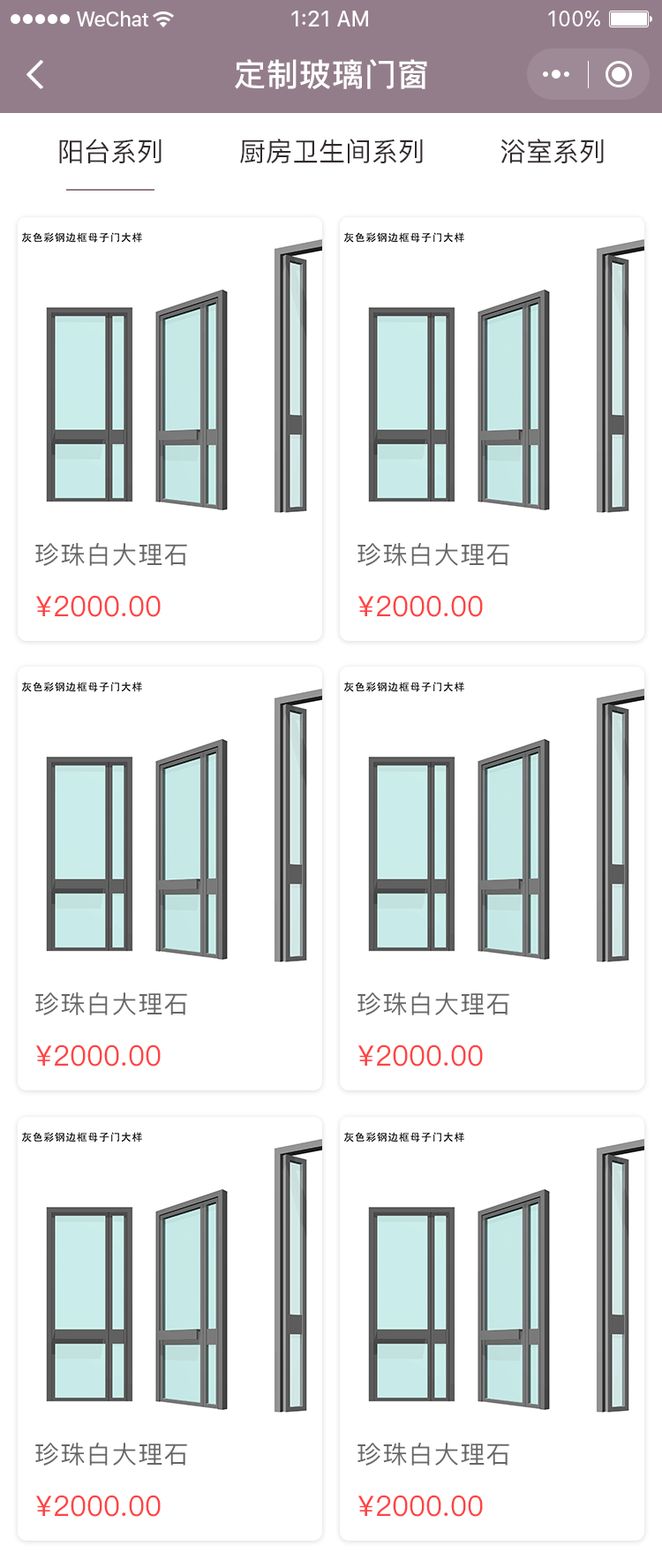
<style>
.page{position:relative;width:662px;height:1568px;background:#ffffff}
.page>*{position:absolute;margin:0}
.t1{font:31.8px "PingFang-SC-Bold";letter-spacing:0.028em;color:#ffffff}
.t2{font:26.5px "PingFang-SC-Medium";color:#322a2b}
.t3{font:24.7px "PingFang-SC-Medium";letter-spacing:0.048em;color:#666666}
.t4{font:28.3px "PingFang-SC-Medium";color:#ff4444}
</style>
<div class="page">
<p class="t1" style="left:235px;top:59px;width:192px;height:30px">定制玻璃门窗</p>
<p class="t2" style="left:59px;top:139px;width:103px;height:24px">阳台系列</p>
<p class="t2" style="left:240px;top:139px;width:183px;height:24px">厨房卫生间系列</p>
<p class="t2" style="left:501px;top:139px;width:103px;height:24px">浴室系列</p>
<p class="t3" style="left:35px;top:543px;width:152px;height:23px">珍珠白大理石</p>
<p class="t3" style="left:358px;top:543px;width:151px;height:23px">珍珠白大理石</p>
<p class="t4" style="left:36px;top:595px;width:125px;height:22px">¥2000.00</p>
<p class="t4" style="left:358px;top:595px;width:125px;height:22px">¥2000.00</p>
<p class="t3" style="left:35px;top:992px;width:152px;height:23px">珍珠白大理石</p>
<p class="t3" style="left:358px;top:992px;width:151px;height:23px">珍珠白大理石</p>
<p class="t4" style="left:36px;top:1044px;width:125px;height:23px">¥2000.00</p>
<p class="t4" style="left:358px;top:1044px;width:125px;height:23px">¥2000.00</p>
<p class="t3" style="left:35px;top:1443px;width:152px;height:23px">珍珠白大理石</p>
<p class="t3" style="left:358px;top:1443px;width:151px;height:23px">珍珠白大理石</p>
<p class="t4" style="left:36px;top:1495px;width:125px;height:22px">¥2000.00</p>
<p class="t4" style="left:358px;top:1495px;width:125px;height:22px">¥2000.00</p>
</div>
